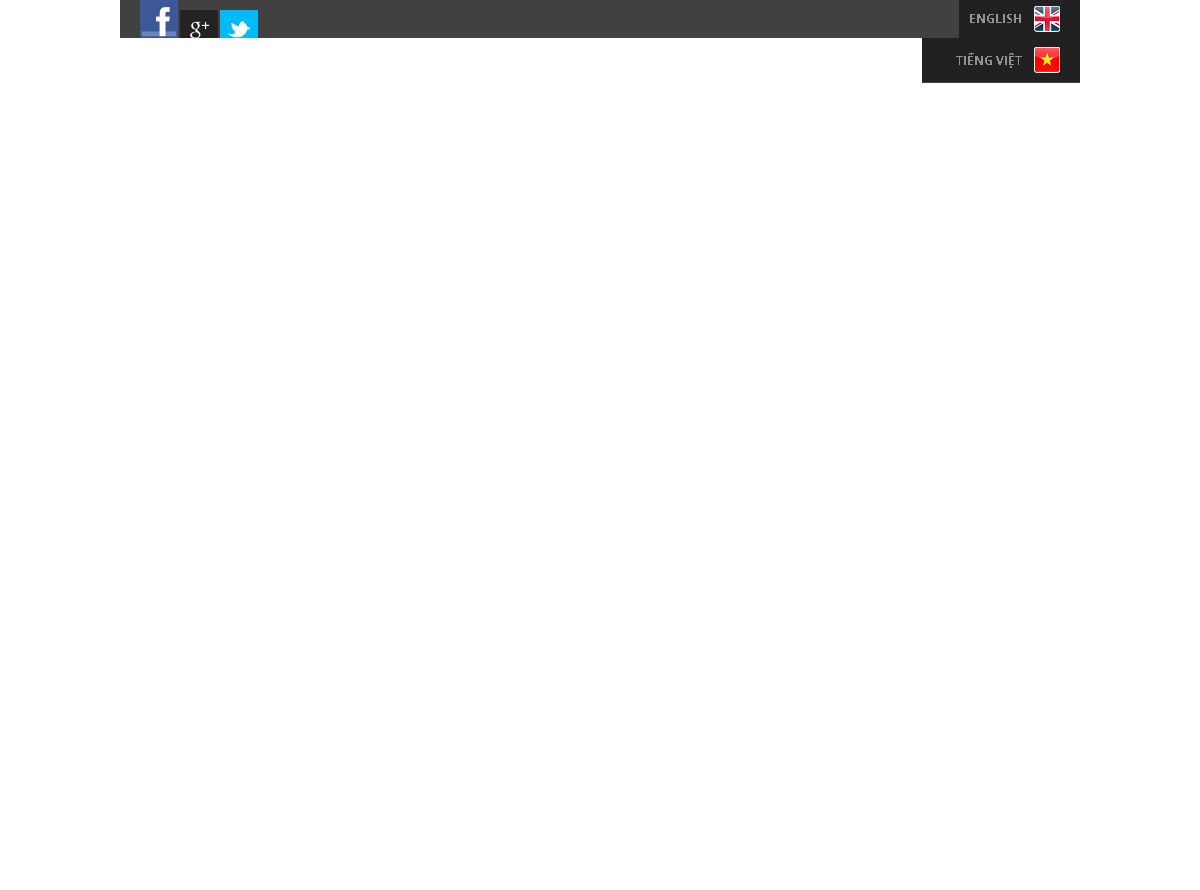
<style>
.page{position:relative;width:1200px;height:890px;background:#ffffff}
.page>*{position:absolute;margin:0}
.t1{font:12px "OpenSans-Bold";color:#929292;text-transform:uppercase}
</style>
<div class="page">
<p class="t1" style="left:970px;top:14px;width:51px;height:9px">English</p>
<p class="t1" style="left:956px;top:53px;width:66px;height:15px">Tiếng Việt</p>
</div>
